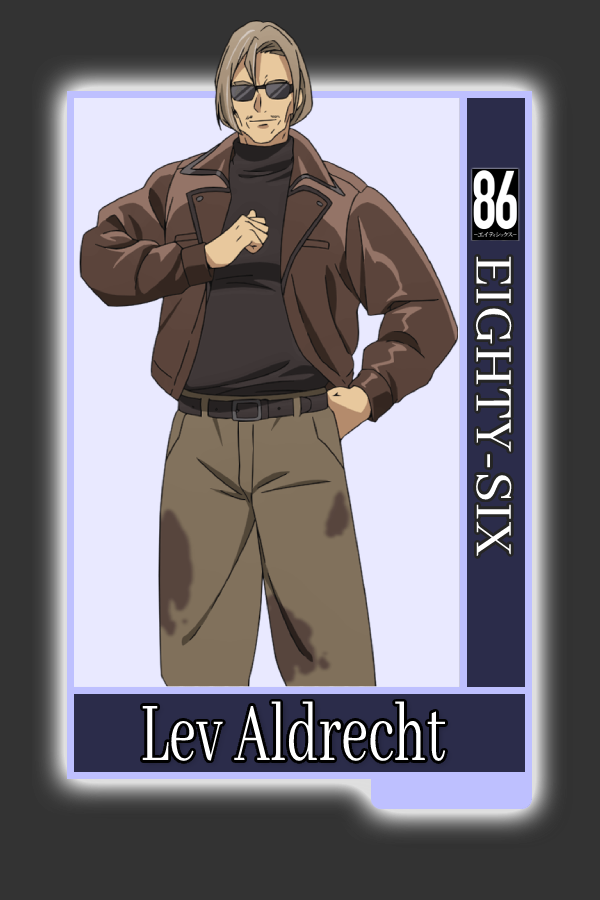
<style>
.page{position:relative;width:600px;height:900px;background:#333333}
.page>*{position:absolute;margin:0}
.t1{font:58.2px "AbhayaLibre-Regular";color:#ffffff}
.t2{font:92px "AbhayaLibre-Regular";color:#ffffff;scale:0.65 1}
</style>
<div class="page">
<p class="t1" style="left:476px;top:256px;width:36px;height:300px;rotate:90deg">EIGHTY-SIX</p>
<p class="t2" style="left:142px;top:701px;width:303px;height:60px">Lev Aldrecht</p>
</div>
